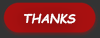
<style>
.page{position:relative;width:100px;height:38px}
.page>*{position:absolute;margin:0}
.t1{font:12.1px "ComicSansMS-BoldItalic";letter-spacing:0.01em;color:#ffffff}
</style>
<div class="page">
<p class="t1" style="left:24px;top:13px;width:52px;height:11px">THANKS</p>
</div>
